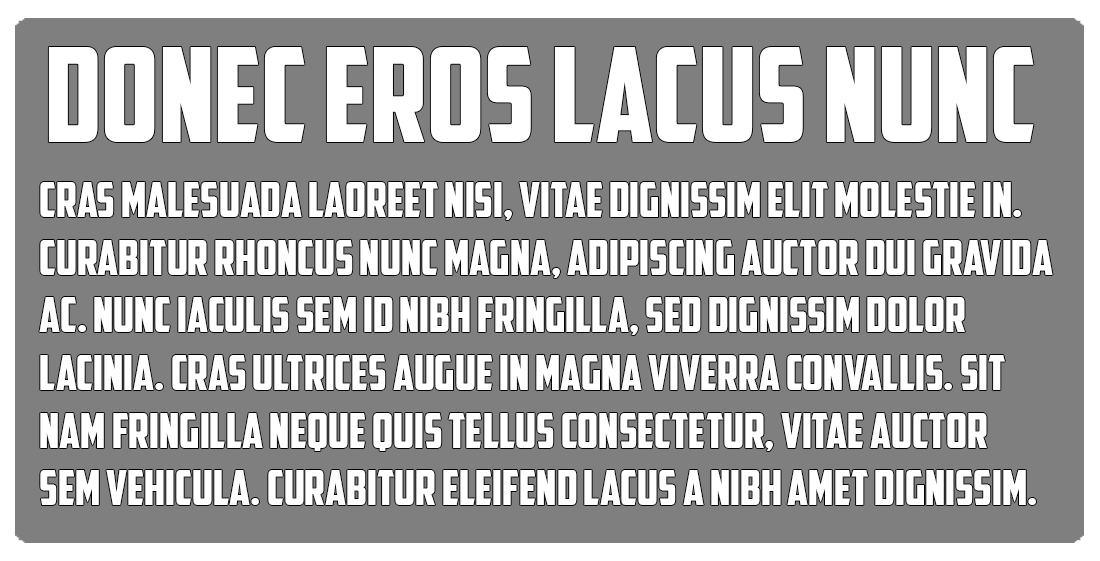
<style>
.page{position:relative;width:1100px;height:561px;background:#7f7f7f}
.page>*{position:absolute;margin:0}
.t1{font:131.2px "AmericanCaptain";color:#ffffff}
.t2{font:48px "AmericanCaptain";color:#ffffff}
</style>
<div class="page">
<p class="t1" style="left:48px;top:47px;width:986px;height:95px">Donec eros lacus nunc</p>
<p class="t2" style="left:39px;top:182px;width:1014px;height:323px">Cras malesuada laoreet nisi, vitae dignissim elit molestie in. <br>Curabitur rhoncus nunc magna, adipiscing auctor dui gravida <br>ac. Nunc iaculis sem id nibh fringilla, sed dignissim dolor <br>lacinia. Cras ultrices augue in magna viverra convallis. Sit<br>Nam fringilla neque quis tellus consectetur, vitae auctor <br>sem vehicula. Curabitur eleifend lacus a nibh amet dignissim.</p>
</div>
